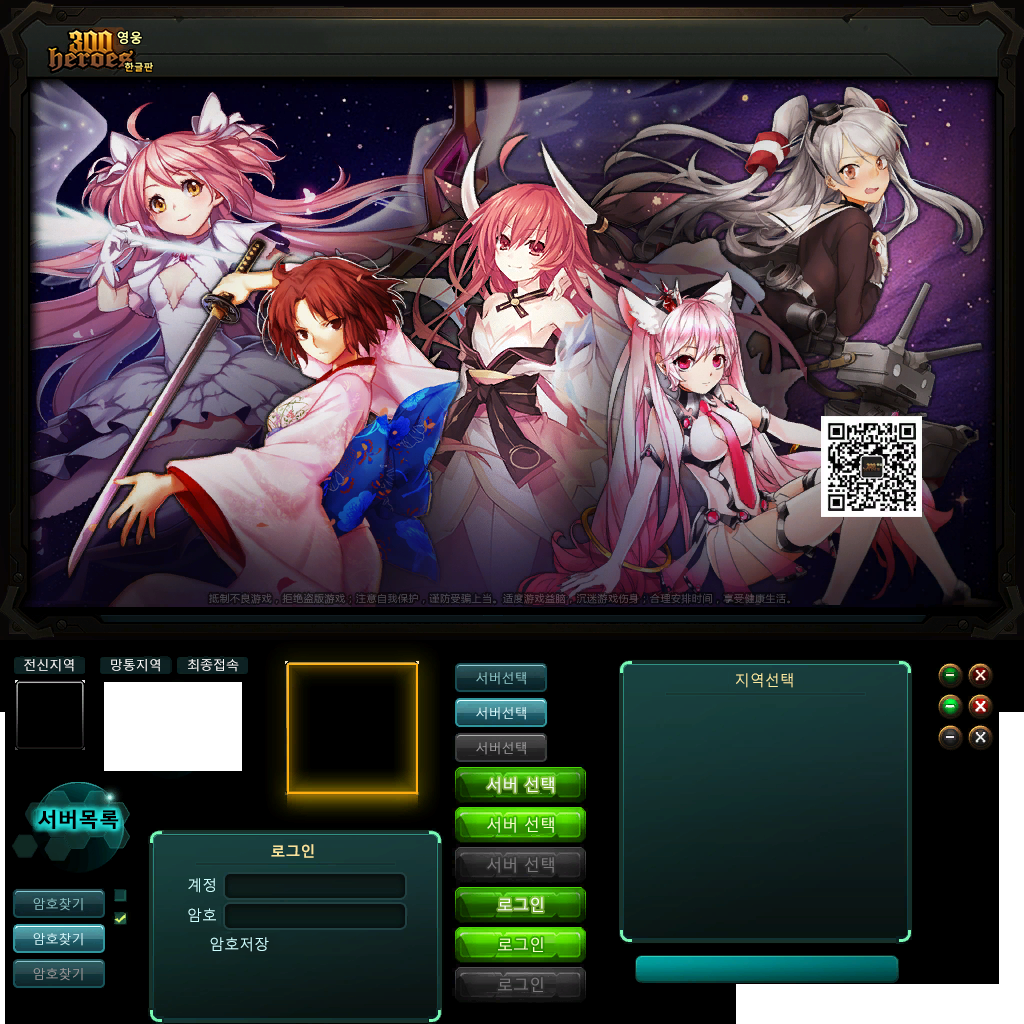
<style>
.page{position:relative;width:1024px;height:1024px}
.page>*{position:absolute;margin:0}
.t1{font:13px "MalgunGothicRegular";color:#ffffff}
.t2{font:13px "MalgunGothicRegular";color:#8cc3c6}
.t3{font:15px "MalgunGothicRegular";color:#fbeba1}
.t4{font:13px "MalgunGothicRegular";color:#d6fbff}
.t5{font:13px "MalgunGothicRegular";color:#9c9a9c}
.t6{font:16px "MalgunGothicRegular";color:#ffffff}
.t7{font:20px "MalgunGothicBold";color:#000000;font-weight:bold}
.t8{font:16px "MalgunGothicRegular";color:#f7ffc6}
.t9{font:15px "MalgunGothicBold";color:#f7e39c}
.t10{font:16px "MalgunGothicRegular";color:#7b797b}
.t11{font:15px "MalgunGothicRegular";color:#ceffff}
</style>
<div class="page">
<p class="t1" style="left:24px;top:659px;width:50px;height:13px">전신지역</p>
<p class="t1" style="left:111px;top:659px;width:49px;height:13px">망통지역</p>
<p class="t1" style="left:188px;top:659px;width:51px;height:13px">최종접속</p>
<p class="t2" style="left:476px;top:672px;width:50px;height:13px">서버선택</p>
<p class="t3" style="left:736px;top:673px;width:57px;height:15px">지역선택</p>
<p class="t4" style="left:476px;top:707px;width:50px;height:13px">서버선택</p>
<p class="t5" style="left:476px;top:742px;width:50px;height:13px">서버선택</p>
<p class="t6" style="left:487px;top:777px;width:67px;height:16px">서버 선택</p>
<p class="t7" style="left:38px;top:809px;width:81px;height:20px">서버목록</p>
<p class="t8" style="left:487px;top:817px;width:67px;height:16px">서버 선택</p>
<p class="t9" style="left:271px;top:844px;width:43px;height:14px">로그인</p>
<p class="t10" style="left:487px;top:857px;width:67px;height:16px">서버 선택</p>
<p class="t11" style="left:188px;top:878px;width:27px;height:15px">계정</p>
<p class="t2" style="left:33px;top:898px;width:50px;height:13px">암호찾기</p>
<p class="t6" style="left:498px;top:897px;width:45px;height:15px">로그인</p>
<p class="t11" style="left:188px;top:908px;width:28px;height:14px">암호</p>
<p class="t4" style="left:33px;top:933px;width:50px;height:13px">암호찾기</p>
<p class="t11" style="left:210px;top:937px;width:59px;height:15px">암호저장</p>
<p class="t8" style="left:498px;top:937px;width:45px;height:15px">로그인</p>
<p class="t5" style="left:33px;top:968px;width:50px;height:13px">암호찾기</p>
<p class="t10" style="left:498px;top:977px;width:45px;height:15px">로그인</p>
</div>
